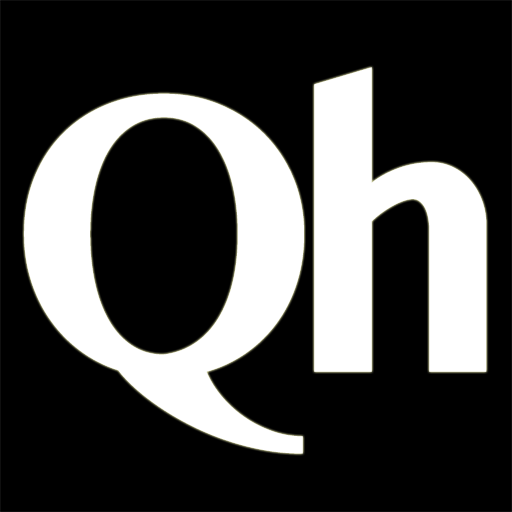
<style>
.page{position:relative;width:512px;height:512px;background:#000000}
.page>*{position:absolute;margin:0}
.t1{font:415.8px "TeluguMN-Bold";letter-spacing:-0.075em;color:#ffffff;scale:0.91 1}
</style>
<div class="page">
<p class="t1" style="left:24px;top:67px;width:463px;height:387px">Qh</p>
</div>
